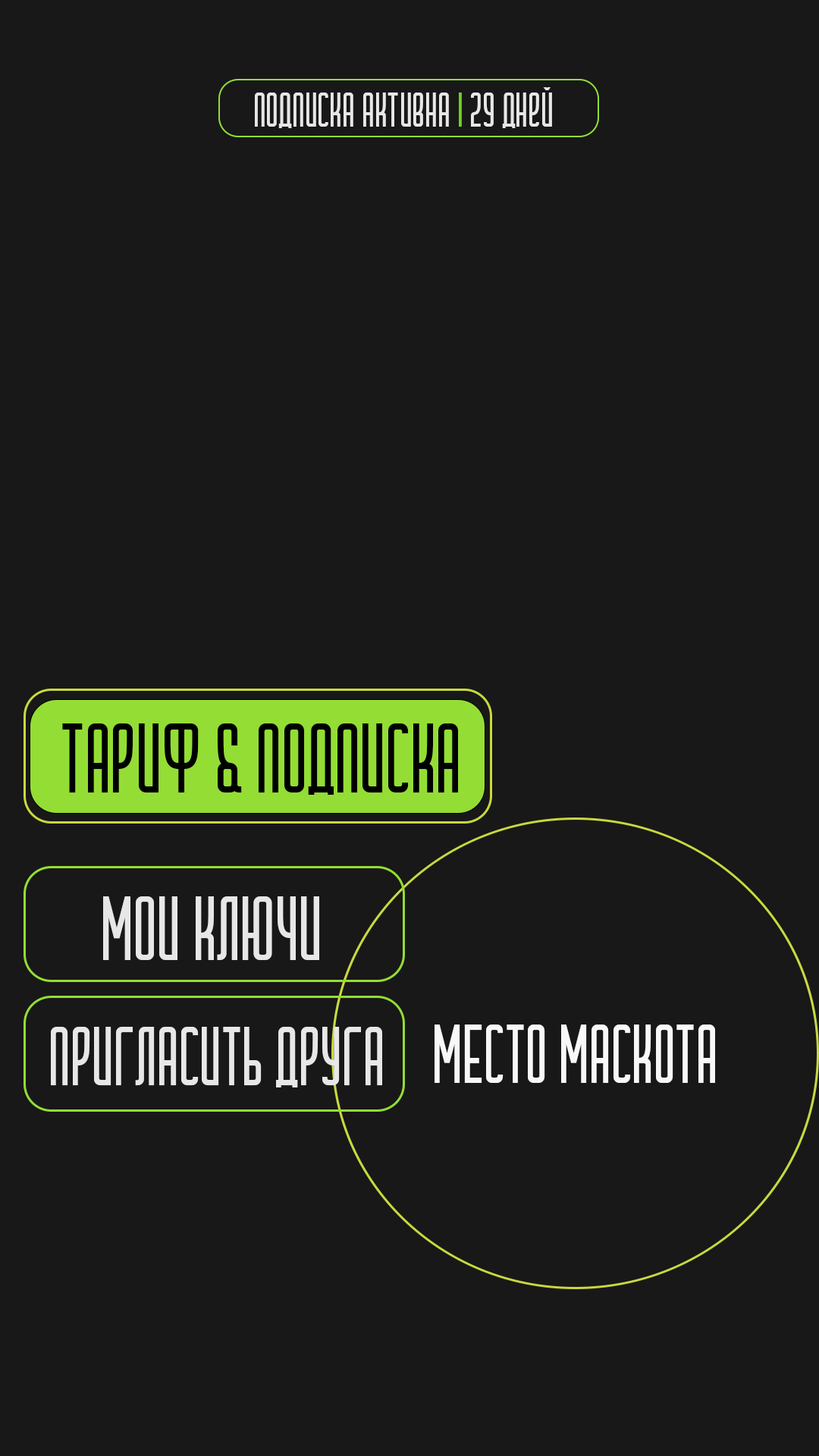
<style>
.page{position:relative;width:819px;height:1456px;background:#181818}
.page>*{position:absolute;margin:0}
.t1{font:48.8px "Cramaten";color:#e7e7e7}
.t2{font:48.8px "Cramaten";color:#6fd021}
.t3{font:98.6px "Cramaten";color:#000000}
.t4{font:91px "Cramaten";color:#e7e7e7}
.t5{font:83.4px "Cramaten";color:#f8f8f8}
.t6{font:83.4px "Cramaten";color:#e7e7e7}
</style>
<div class="page">
<p class="t1" style="left:255px;top:87px;width:297px;height:41px">подписка активна <span class="t2">|</span> 29 дней</p>
<p class="t3" style="left:62px;top:723px;width:396px;height:72px">Тариф &amp; подписка</p>
<p class="t4" style="left:103px;top:896px;width:216px;height:64px">Мои ключи</p>
<p class="t5" style="left:435px;top:1024px;width:280px;height:59px">МЕСТО МАСКОТА</p>
<p class="t6" style="left:51px;top:1027px;width:331px;height:60px">пригласить друга</p>
</div>
